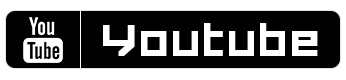
<style>
.page{position:relative;width:346px;height:80px;background:#010101}
.page>*{position:absolute;margin:0}
.t1{font:60px "FORCED-SQUARE";color:#fefefe}
</style>
<div class="page">
<p class="t1" style="left:103px;top:23px;width:215px;height:33px">Youtube</p>
</div>
